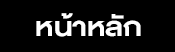
<style>
.page{position:relative;width:175px;height:52px;background:#000000}
.page>*{position:absolute;margin:0}
.t1{font:39px "DBHelvethaicaX-BdExt";color:#ffffff}
</style>
<div class="page">
<p class="t1" style="left:36px;top:13px;width:105px;height:24px">หน้าหลัก</p>
</div>
